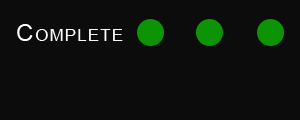
<style>
.page{position:relative;width:300px;height:120px;background:#0c0c0c}
.page>*{position:absolute;margin:0}
.t1{font:24px "ArialMT";letter-spacing:0.075em;color:#ffffff;font-variant:small-caps}
</style>
<div class="page">
<p class="t1" style="left:17px;top:24px;width:106px;height:17px">Complete</p>
</div>
